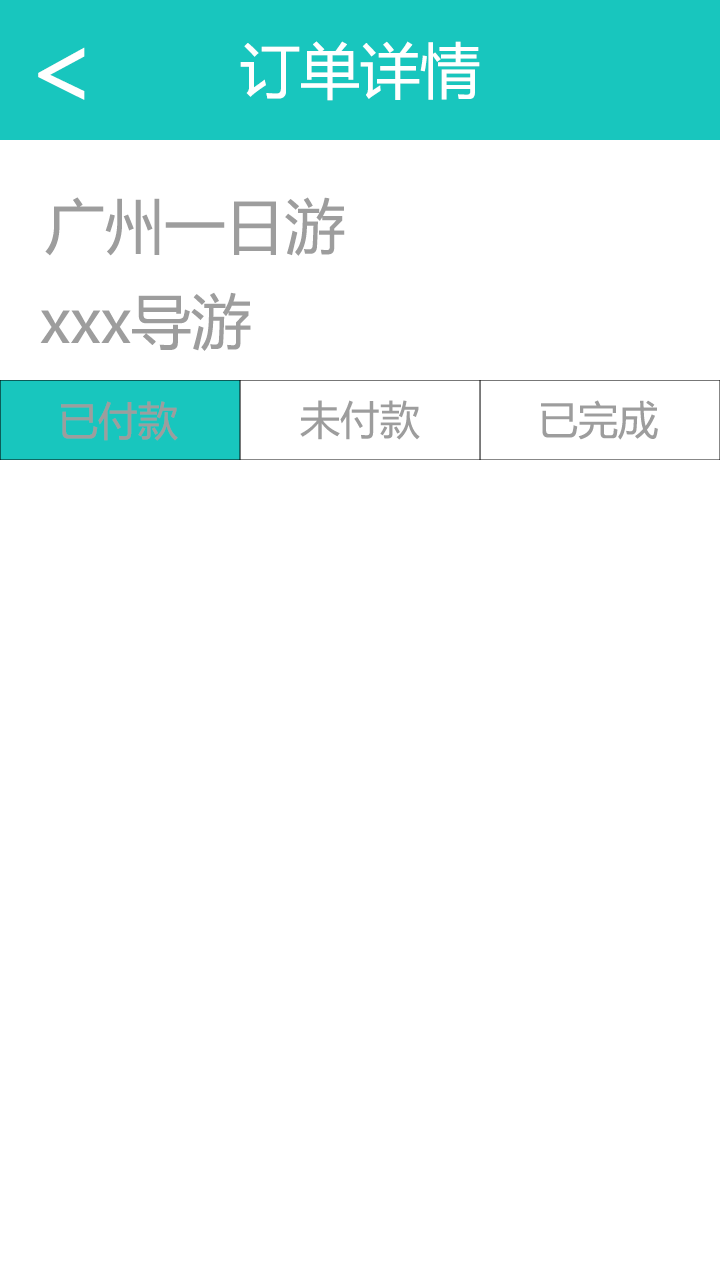
<style>
.page{position:relative;width:720px;height:1280px;background:#ffffff}
.page>*{position:absolute;margin:0}
.t1{font:60px "MicrosoftYaHei";color:#ffffff}
.t2{font:60px "MicrosoftYaHei";color:#9d9d9d}
.t3{font:40px "MicrosoftYaHei";color:#9d9d9d}
</style>
<div class="page">
<p class="t1" style="left:240px;top:41px;width:240px;height:60px">订单详情</p>
<p class="t2" style="left:45px;top:197px;width:300px;height:59px">广州一日游</p>
<p class="t2" style="left:40px;top:292px;width:211px;height:59px">xxx导游</p>
<p class="t3" style="left:61px;top:401px;width:117px;height:40px">已付款</p>
<p class="t3" style="left:300px;top:400px;width:120px;height:40px">未付款</p>
<p class="t3" style="left:541px;top:400px;width:117px;height:40px">已完成</p>
</div>
